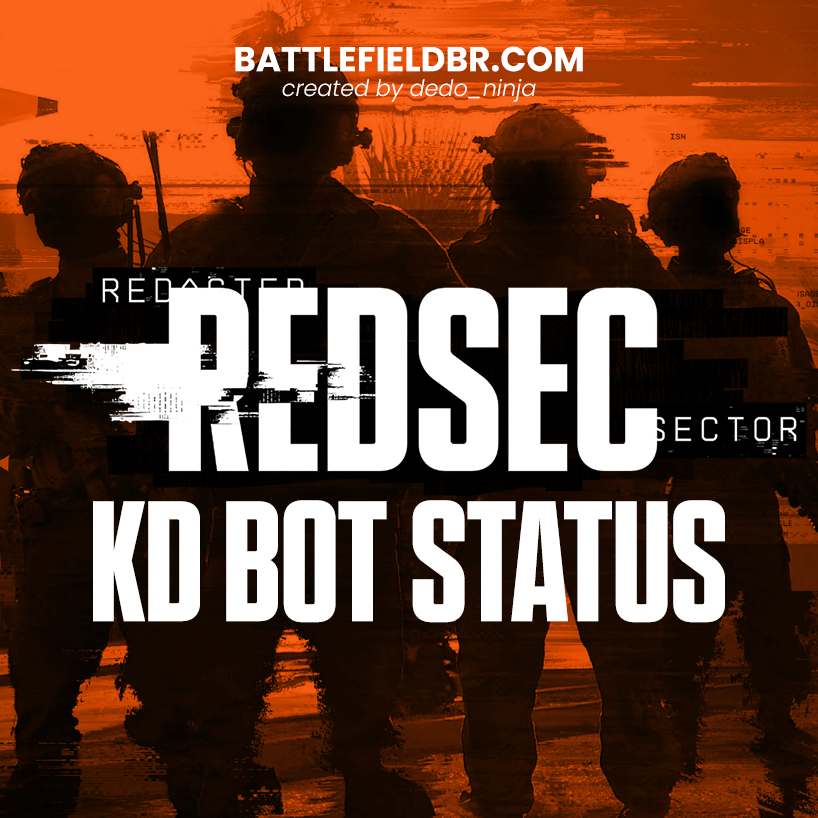
<style>
.page{position:relative;width:818px;height:818px}
.page>*{position:absolute;margin:0}
.t1{font:34.6px "Poppins-Bold";color:#ffffff;text-transform:uppercase}
.t2{font:22.5px "Poppins-LightItalic";color:#ffffff}
.t3{font:170.8px "BF_HEADLINE_NARROW-BOLD";color:#ffffff;text-transform:uppercase}
</style>
<div class="page">
<p class="t1" style="left:235px;top:46px;width:348px;height:26px">battlefieldbr.com</p>
<p class="t2" style="left:282px;top:79px;width:254px;height:23px">created by dedo_ninja</p>
<p class="t3" style="left:93px;top:500px;width:632px;height:123px">kd bot Status</p>
</div>
